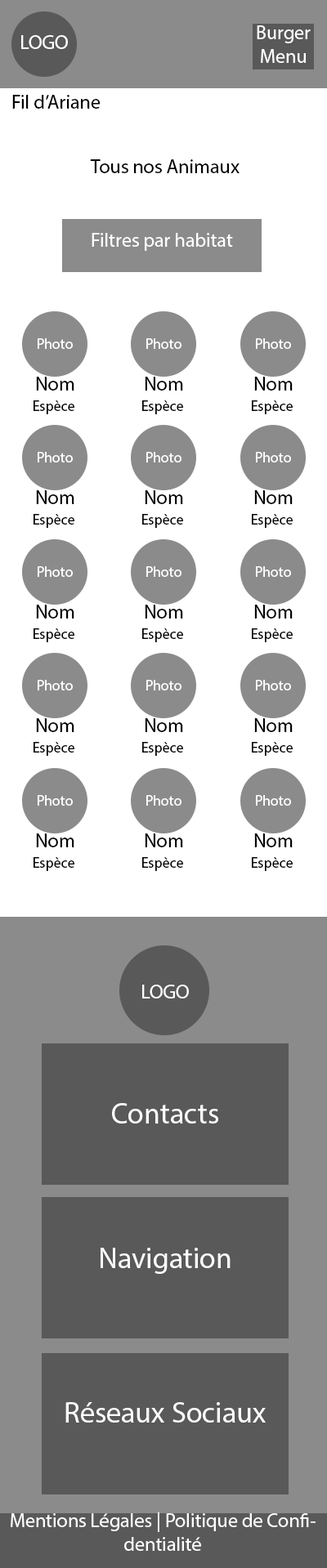
<style>
.page{position:relative;width:327px;height:1568px;background:#ffffff}
.page>*{position:absolute;margin:0}
.t1{font:19.6px "MyriadPro-Regular";color:#ffffff}
.t2{font:19.6px "MyriadPro-Regular";color:#000000}
.t3{font:14.7px "MyriadPro-Regular";color:#fffefe}
.t4{font:14.7px "MyriadPro-Regular";color:#010101}
.t5{font:19.6px "MyriadPro-Regular";color:#fffefe}
.t6{font:29.4px "MyriadPro-Regular";color:#fffefe}
</style>
<div class="page">
<p class="t1" style="left:257px;top:25px;width:53px;height:38px;text-align:center">Burger Menu</p>
<p class="t1" style="left:21px;top:35px;width:47px;height:14px">LOGO</p>
<p class="t2" style="left:12px;top:95px;width:89px;height:14px">Fil d’Ariane</p>
<p class="t2" style="left:90px;top:159px;width:149px;height:14px">Tous nos Animaux</p>
<p class="t1" style="left:92px;top:233px;width:141px;height:18px">Filtres par habitat</p>
<p class="t3" style="left:38px;top:338px;width:35px;height:11px">Photo</p>
<p class="t3" style="left:146px;top:338px;width:35px;height:11px">Photo</p>
<p class="t3" style="left:256px;top:338px;width:35px;height:11px">Photo</p>
<p class="t2" style="left:36px;top:377px;width:38px;height:14px">Nom</p>
<p class="t2" style="left:145px;top:377px;width:38px;height:14px">Nom</p>
<p class="t2" style="left:254px;top:377px;width:39px;height:14px">Nom</p>
<p class="t4" style="left:34px;top:400px;width:40px;height:14px">Espèce</p>
<p class="t4" style="left:142px;top:400px;width:41px;height:14px">Espèce</p>
<p class="t4" style="left:252px;top:400px;width:41px;height:14px">Espèce</p>
<p class="t3" style="left:38px;top:452px;width:35px;height:10px">Photo</p>
<p class="t3" style="left:146px;top:452px;width:35px;height:10px">Photo</p>
<p class="t3" style="left:256px;top:452px;width:35px;height:10px">Photo</p>
<p class="t2" style="left:36px;top:490px;width:38px;height:14px">Nom</p>
<p class="t2" style="left:145px;top:490px;width:38px;height:14px">Nom</p>
<p class="t2" style="left:254px;top:490px;width:39px;height:14px">Nom</p>
<p class="t4" style="left:34px;top:514px;width:40px;height:14px">Espèce</p>
<p class="t4" style="left:142px;top:514px;width:41px;height:14px">Espèce</p>
<p class="t4" style="left:252px;top:514px;width:41px;height:14px">Espèce</p>
<p class="t3" style="left:38px;top:566px;width:35px;height:11px">Photo</p>
<p class="t3" style="left:146px;top:566px;width:35px;height:11px">Photo</p>
<p class="t3" style="left:256px;top:566px;width:35px;height:11px">Photo</p>
<p class="t2" style="left:36px;top:605px;width:38px;height:14px">Nom</p>
<p class="t2" style="left:145px;top:605px;width:38px;height:14px">Nom</p>
<p class="t2" style="left:254px;top:605px;width:39px;height:14px">Nom</p>
<p class="t4" style="left:34px;top:628px;width:40px;height:14px">Espèce</p>
<p class="t4" style="left:142px;top:628px;width:41px;height:14px">Espèce</p>
<p class="t4" style="left:252px;top:628px;width:41px;height:14px">Espèce</p>
<p class="t3" style="left:38px;top:680px;width:35px;height:10px">Photo</p>
<p class="t3" style="left:146px;top:680px;width:35px;height:10px">Photo</p>
<p class="t3" style="left:256px;top:680px;width:35px;height:10px">Photo</p>
<p class="t2" style="left:36px;top:718px;width:38px;height:14px">Nom</p>
<p class="t2" style="left:145px;top:718px;width:38px;height:14px">Nom</p>
<p class="t2" style="left:254px;top:718px;width:39px;height:14px">Nom</p>
<p class="t4" style="left:34px;top:742px;width:40px;height:14px">Espèce</p>
<p class="t4" style="left:142px;top:742px;width:41px;height:14px">Espèce</p>
<p class="t4" style="left:252px;top:742px;width:41px;height:14px">Espèce</p>
<p class="t3" style="left:38px;top:795px;width:35px;height:11px">Photo</p>
<p class="t3" style="left:146px;top:795px;width:35px;height:11px">Photo</p>
<p class="t3" style="left:256px;top:795px;width:35px;height:11px">Photo</p>
<p class="t2" style="left:36px;top:833px;width:38px;height:14px">Nom</p>
<p class="t2" style="left:145px;top:833px;width:38px;height:14px">Nom</p>
<p class="t2" style="left:254px;top:833px;width:39px;height:14px">Nom</p>
<p class="t4" style="left:34px;top:857px;width:40px;height:14px">Espèce</p>
<p class="t4" style="left:142px;top:857px;width:41px;height:14px">Espèce</p>
<p class="t4" style="left:252px;top:857px;width:41px;height:14px">Espèce</p>
<p class="t5" style="left:142px;top:985px;width:47px;height:13px">LOGO</p>
<p class="t6" style="left:112px;top:1103px;width:106px;height:21px">Contacts</p>
<p class="t6" style="left:101px;top:1248px;width:129px;height:26px">Navigation</p>
<p class="t6" style="left:65px;top:1402px;width:201px;height:21px">Réseaux Sociaux</p>
<p class="t5" style="left:11px;top:1512px;width:304px;height:39px;text-align:center">Mentions Légales | Politique de Confidentialité</p>
</div>
